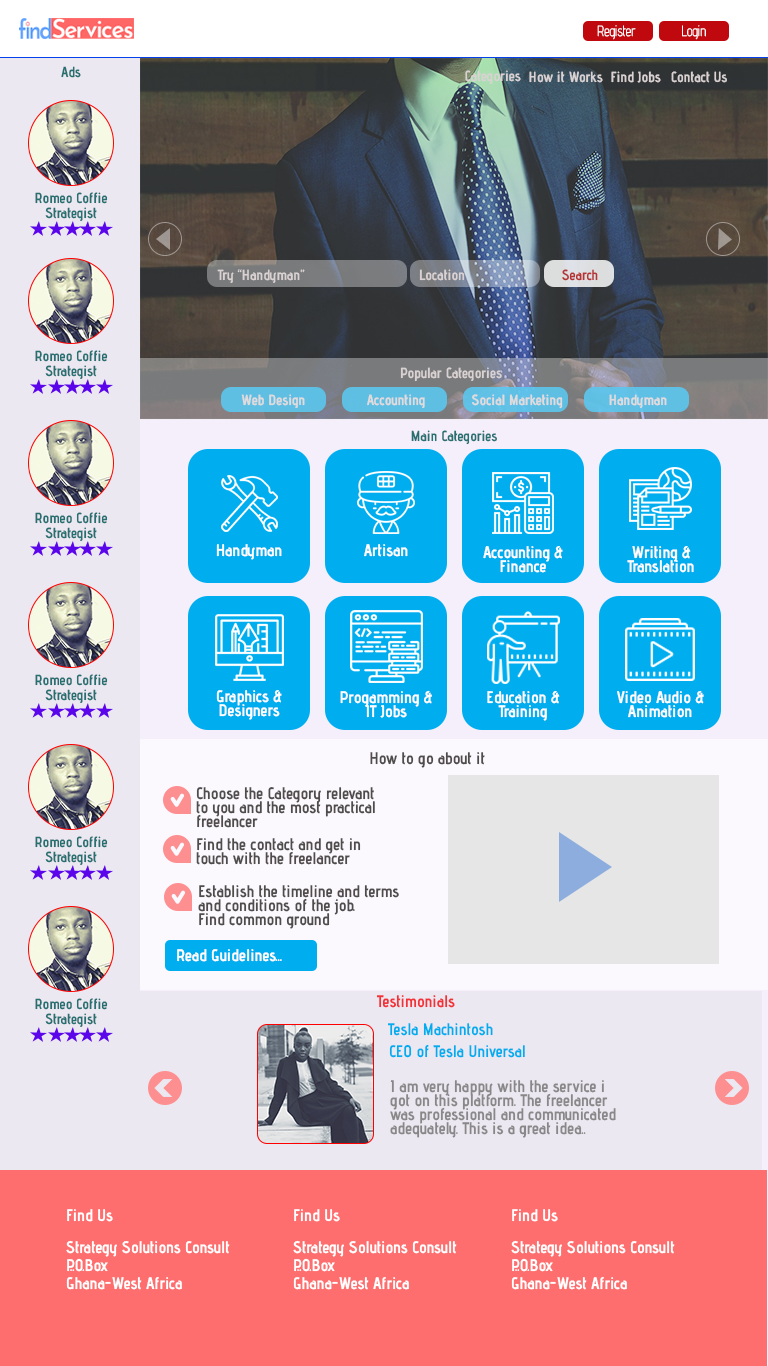
<style>
.page{position:relative;width:768px;height:1366px}
.page>*{position:absolute;margin:0}
.t1{font:14.7px "AdventPro-Light";letter-spacing:-0.005em;color:#ffffff;scale:0.86 1}
.t2{font:14.7px "AdventPro-Bold";letter-spacing:-0.005em;color:#277071;scale:0.95 1}
.t3{font:14.7px "AdventPro-Bold";letter-spacing:-0.005em;color:#dad2d2;scale:0.95 1}
.t4{font:14.7px "AdventPro-Bold";letter-spacing:-0.005em;color:#b63131;scale:0.95 1}
.t5{font:16.8px "AdventPro-Bold";letter-spacing:-0.005em;color:#ffffff;scale:0.95 1}
.t6{font:16.8px/14px "AdventPro-Bold";letter-spacing:-0.005em;color:#ffffff;scale:0.95 1}
.t7{font:16.8px "AdventPro-Bold";letter-spacing:-0.005em;color:#504c4c;scale:0.95 1}
.t8{font:16.8px/14px "AdventPro-Bold";letter-spacing:-0.005em;color:#504c4c;scale:0.95 1}
.t9{font:16.8px "AdventPro-Bold";letter-spacing:-0.005em;color:#f23236;scale:0.95 1}
.t10{font:16.8px "AdventPro-Bold";letter-spacing:-0.005em;color:#00aeef;scale:0.95 1}
.t11{font:16.8px/14px "AdventPro-Bold";letter-spacing:-0.005em;color:#8a8789;scale:0.95 1}
.t12{font:16.8px/18px "AdventPro-Bold";letter-spacing:-0.005em;color:#ffffff;scale:0.95 1}
</style>
<div class="page">
<p class="t1" style="left:597px;top:25px;width:39px;height:15px">Register</p>
<p class="t1" style="left:682px;top:25px;width:24px;height:15px">Login</p>
<p class="t2" style="left:61px;top:66px;width:20px;height:12px">Ads</p>
<p class="t3" style="left:465px;top:70px;width:56px;height:15px">Categories</p>
<p class="t3" style="left:529px;top:71px;width:74px;height:12px">How it Works</p>
<p class="t3" style="left:611px;top:71px;width:50px;height:12px">Find Jobs</p>
<p class="t3" style="left:671px;top:71px;width:56px;height:12px">Contact Us</p>
<p class="t2" style="left:35px;top:192px;width:73px;height:12px">Romeo Coffie</p>
<p class="t2" style="left:45px;top:207px;width:52px;height:14px">Strategist</p>
<p class="t3" style="left:217px;top:269px;width:88px;height:14px">Try “Handyman”</p>
<p class="t3" style="left:419px;top:269px;width:46px;height:12px">Location</p>
<p class="t4" style="left:562px;top:269px;width:36px;height:12px">Search</p>
<p class="t2" style="left:35px;top:350px;width:73px;height:12px">Romeo Coffie</p>
<p class="t2" style="left:45px;top:365px;width:52px;height:14px">Strategist</p>
<p class="t3" style="left:400px;top:367px;width:102px;height:15px">Popular Categories</p>
<p class="t3" style="left:241px;top:394px;width:64px;height:14px">Web Design</p>
<p class="t3" style="left:367px;top:394px;width:58px;height:14px">Accounting</p>
<p class="t3" style="left:472px;top:394px;width:91px;height:15px">Social Marketing</p>
<p class="t3" style="left:609px;top:394px;width:58px;height:14px">Handyman</p>
<p class="t2" style="left:411px;top:430px;width:86px;height:15px">Main Categories</p>
<p class="t2" style="left:35px;top:512px;width:73px;height:12px">Romeo Coffie</p>
<p class="t2" style="left:45px;top:527px;width:52px;height:14px">Strategist</p>
<p class="t5" style="left:216px;top:544px;width:66px;height:16px">Handyman</p>
<p class="t5" style="left:364px;top:544px;width:44px;height:13px">Artisan</p>
<p class="t6" style="left:483px;top:546px;width:80px;height:27px;text-align:center">Accounting &amp;<br>Finance</p>
<p class="t6" style="left:627px;top:546px;width:67px;height:27px;text-align:center">Writing &amp;<br>Translation</p>
<p class="t2" style="left:35px;top:674px;width:73px;height:12px">Romeo Coffie</p>
<p class="t2" style="left:45px;top:689px;width:52px;height:14px">Strategist</p>
<p class="t6" style="left:216px;top:690px;width:66px;height:30px;text-align:center">Graphics &amp;<br>Designers</p>
<p class="t6" style="left:340px;top:690px;width:92px;height:28px;text-align:center">Progamming &amp;<br>IT Jobs</p>
<p class="t6" style="left:487px;top:691px;width:73px;height:30px;text-align:center">Education &amp;<br>Training</p>
<p class="t6" style="left:617px;top:691px;width:87px;height:27px;text-align:center">Video Audio &amp;<br>Animation</p>
<p class="t7" style="left:370px;top:752px;width:115px;height:16px">How to go about it</p>
<p class="t8" style="left:196px;top:787px;width:179px;height:41px">Choose the Category relevant<br>to you and the most practical<br>freelancer</p>
<p class="t2" style="left:35px;top:836px;width:73px;height:12px">Romeo Coffie</p>
<p class="t8" style="left:196px;top:838px;width:165px;height:27px">Find the contact and get in<br>touch with the freelancer</p>
<p class="t2" style="left:45px;top:851px;width:52px;height:14px">Strategist</p>
<p class="t8" style="left:198px;top:885px;width:201px;height:44px">Establish the timeline and terms<br>and conditions of the job.<br>Find common ground</p>
<p class="t5" style="left:177px;top:949px;width:105px;height:13px">Read Guidelines...</p>
<p class="t2" style="left:35px;top:998px;width:73px;height:12px">Romeo Coffie</p>
<p class="t9" style="left:377px;top:995px;width:78px;height:13px">Testimonials</p>
<p class="t2" style="left:45px;top:1013px;width:52px;height:14px">Strategist</p>
<p class="t10" style="left:388px;top:1023px;width:105px;height:13px">Tesla Machintosh</p>
<p class="t10" style="left:389px;top:1044px;width:136px;height:14px">CEO of Tesla Universal</p>
<p class="t11" style="left:390px;top:1080px;width:226px;height:58px">I am very happy with the service i got on this platform. The freelancer was professional and communicated adequately. This is a great idea..</p>
<p class="t12" style="left:66px;top:1209px;width:164px;height:81px"><span class="t6">Find Us<br><br></span>Strategy Solutions Consult<br>P..O.Box <br>Ghana-West Africa</p>
<p class="t12" style="left:293px;top:1209px;width:164px;height:81px"><span class="t6">Find Us<br><br></span>Strategy Solutions Consult<br>P..O.Box <br>Ghana-West Africa</p>
<p class="t12" style="left:511px;top:1209px;width:164px;height:81px"><span class="t6">Find Us<br><br></span>Strategy Solutions Consult<br>P..O.Box <br>Ghana-West Africa</p>
</div>
